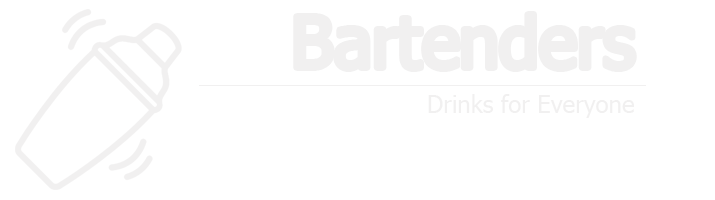
<style>
.page{position:relative;width:715px;height:200px;background:#ffffff}
.page>*{position:absolute;margin:0}
.t1{font:71.5px "Tahoma";color:#f1f0f0}
.t2{font:24.1px "Tahoma";color:#f1f0f0}
</style>
<div class="page">
<p class="t1" style="left:296px;top:14px;width:338px;height:55px">Bartenders</p>
<p class="t2" style="left:428px;top:94px;width:206px;height:24px">Drinks for Everyone<br>ee</p>
</div>
